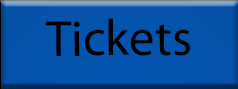
<style>
.page{position:relative;width:238px;height:89px}
.page>*{position:absolute;margin:0}
.t1{font:51px "MyriadPro-Regular";color:#000000}
</style>
<div class="page">
<p class="t1" style="left:45px;top:18px;width:145px;height:38px">Tickets</p>
</div>
